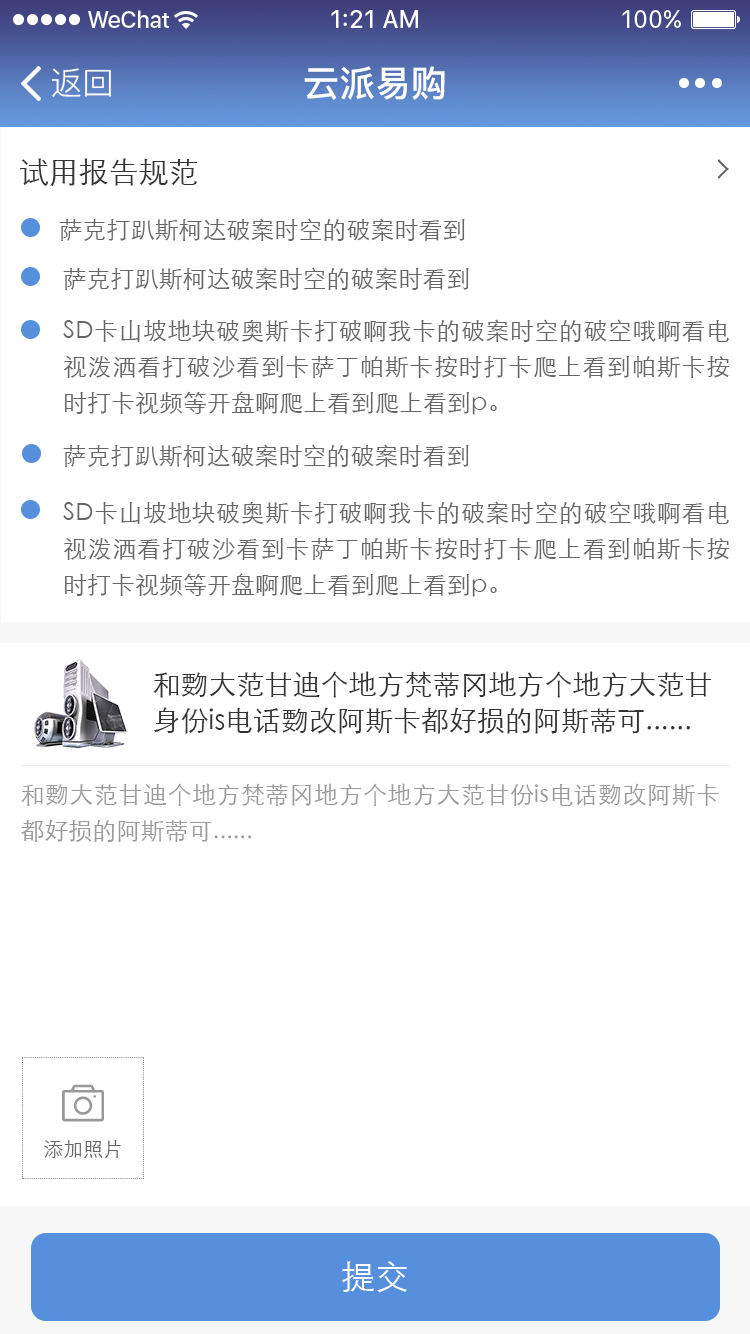
<style>
.page{position:relative;width:750px;height:1334px;background:#ffffff}
.page>*{position:absolute;margin:0}
.t1{font:32px "PingFang-SC-Regular";color:#ffffff}
.t2{font:36px "PingFang-SC-Bold";color:#ffffff}
.t3{font:30px "STXihei";color:#333333}
.t4{font:24px "STXihei";color:#666666}
.t5{font:24px/36px "STXihei";color:#666666}
.t6{font:28px/36px "STXihei";color:#333333}
.t7{font:24px/36px "STXihei";color:#999999}
.t8{font:20px "STXihei";color:#666666}
.t9{font:34px "STXihei";color:#ffffff}
</style>
<div class="page">
<p class="t1" style="left:52px;top:68px;width:59px;height:29px">返回</p>
<p class="t2" style="left:304px;top:66px;width:141px;height:34px">云派易购</p>
<p class="t3" style="left:20px;top:158px;width:178px;height:28px">试用报告规范</p>
<p class="t4" style="left:59px;top:218px;width:406px;height:23px">萨克打趴斯柯达破案时空的破案时看到</p>
<p class="t4" style="left:63px;top:267px;width:406px;height:23px">萨克打趴斯柯达破案时空的破案时看到</p>
<p class="t5" style="left:63px;top:319px;width:666px;height:96px;text-align:justify">SD卡山坡地块破奥斯卡打破啊我卡的破案时空的破空哦啊看电视泼洒看打破沙看到卡萨丁帕斯卡按时打卡爬上看到帕斯卡按时打卡视频等开盘啊爬上看到爬上看到p。</p>
<p class="t4" style="left:63px;top:444px;width:406px;height:23px">萨克打趴斯柯达破案时空的破案时看到</p>
<p class="t5" style="left:63px;top:501px;width:666px;height:96px;text-align:justify">SD卡山坡地块破奥斯卡打破啊我卡的破案时空的破空哦啊看电视泼洒看打破沙看到卡萨丁帕斯卡按时打卡爬上看到帕斯卡按时打卡视频等开盘啊爬上看到爬上看到p。</p>
<p class="t6" style="left:153px;top:671px;width:559px;height:63px;text-align:justify">和覅大范甘迪个地方梵蒂冈地方个地方大范甘<br>身份is电话覅改阿斯卡都好损的阿斯蒂可......</p>
<p class="t7" style="left:21px;top:783px;width:698px;height:59px;text-align:justify">和覅大范甘迪个地方梵蒂冈地方个地方大范甘份is电话覅改阿斯卡都好损的阿斯蒂可......</p>
<p class="t8" style="left:44px;top:1140px;width:77px;height:19px">添加照片</p>
<p class="t9" style="left:342px;top:1261px;width:65px;height:32px">提交</p>
</div>
